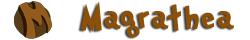
<style>
.page{position:relative;width:250px;height:40px;background:#ffffff}
.page>*{position:absolute;margin:0}
.t1{font:33.2px "Grinched";letter-spacing:0.075em;color:#8c5009;font-weight:bold}
</style>
<div class="page">
<p class="t1" style="left:81px;top:2px;width:154px;height:36px">Magrathea</p>
</div>
